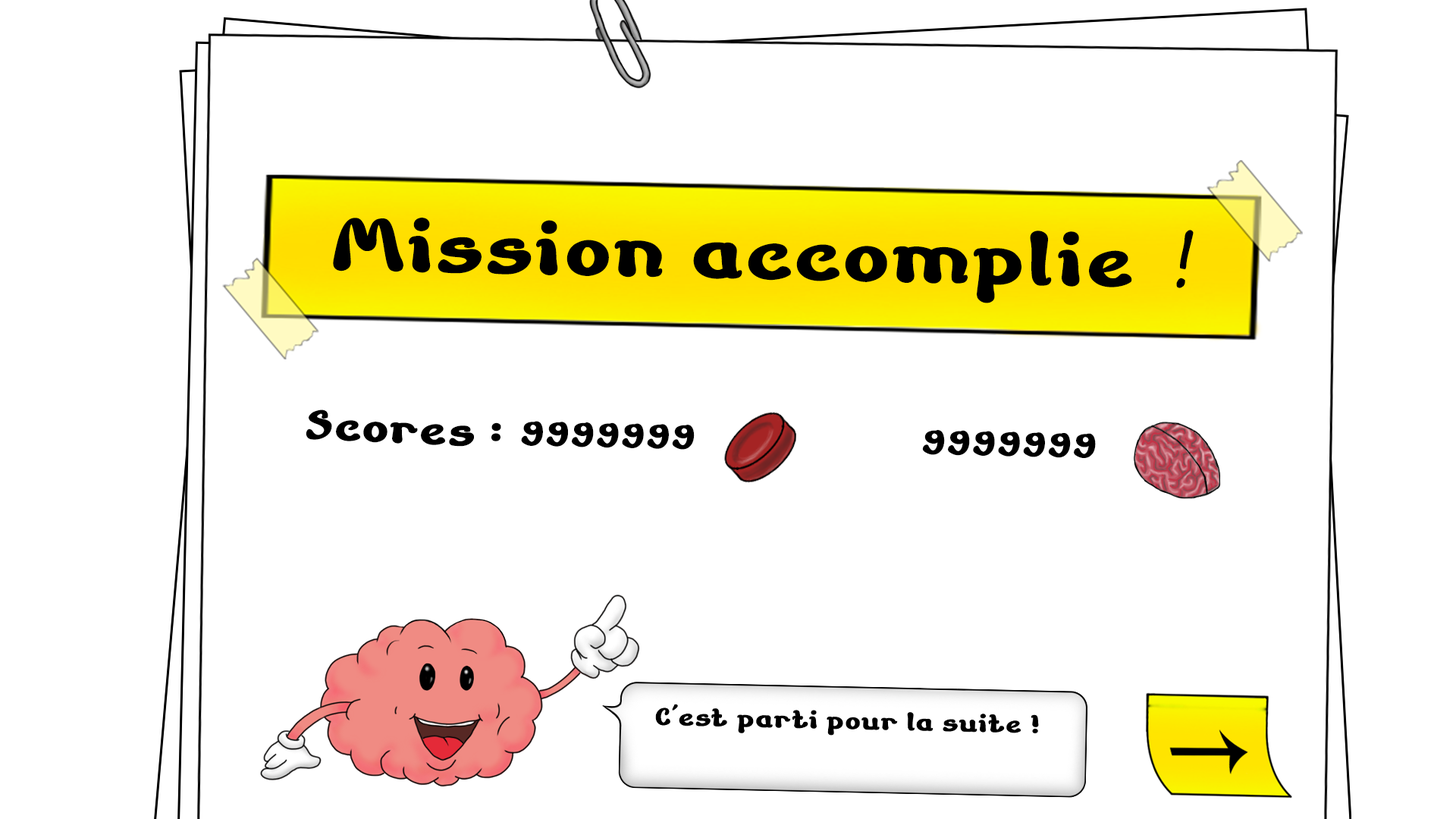
<style>
.page{position:relative;width:1456px;height:819px;background:#ffffff}
.page>*{position:absolute;margin:0}
.t1{font:80.6px "ChildrenStories";letter-spacing:-0.005em;color:#000000;font-weight:bold}
.t2{font:80.6px "SegoePrint";letter-spacing:-0.005em;color:#000000;font-weight:bold}
.t3{font:45.5px "ChildrenStories";letter-spacing:-0.005em;color:#000000;font-weight:bold}
.t4{font:36.4px "ChildrenStories";letter-spacing:-0.005em;color:#000000;font-weight:bold}
</style>
<div class="page">
<p class="t1" style="left:333px;top:218px;width:861px;height:85px;rotate:1deg">Mission accomplie<span class="t2"> !</span></p>
<p class="t3" style="left:306px;top:409px;width:195px;height:38px;rotate:3deg">Scores :</p>
<p class="t4" style="left:521px;top:421px;width:174px;height:29px;rotate:1deg">9999999</p>
<p class="t4" style="left:922px;top:430px;width:174px;height:28px;rotate:1deg">9999999</p>
</div>
